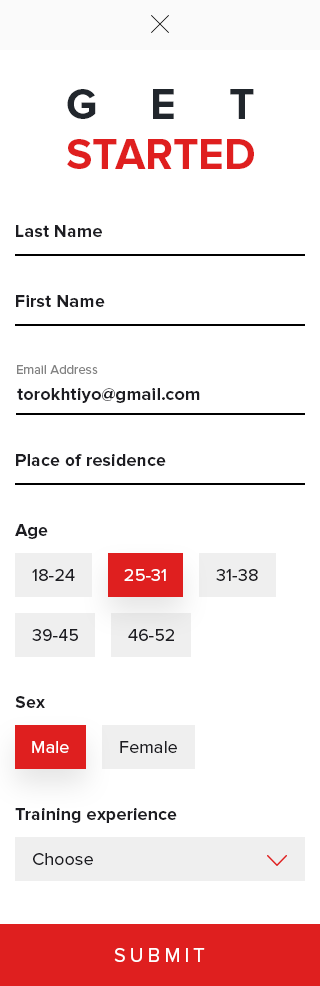
<style>
.page{position:relative;width:320px;height:986px;background:#ffffff}
.page>*{position:absolute;margin:0}
.t1{font:44px/50px "ProximaNova-Bold";color:#df1f1f}
.t2{font:44px/50px "ProximaNova-Bold";letter-spacing:1.2em;color:#21262c}
.t3{font:18px "ProximaNova-Bold";letter-spacing:0.005em;color:#1d1d22}
.t4{font:13px "ProximaNova-Regular";letter-spacing:0.005em;color:#838383}
.t5{font:18px "ProximaNova-Regular";letter-spacing:0.005em;color:#1d1d22}
.t6{font:18px "ProximaNova-Regular";letter-spacing:0.005em;color:#ffffff}
.t7{font:20px "ProximaNova-Regular";letter-spacing:0.2em;color:#ffffff}
</style>
<div class="page">
<p class="t1" style="left:67px;top:89px;width:187px;height:80px"><span class="t2">GET<br></span>STARTED</p>
<p class="t3" style="left:16px;top:225px;width:86px;height:12px">Last Name</p>
<p class="t3" style="left:16px;top:295px;width:89px;height:12px">First Name</p>
<p class="t4" style="left:17px;top:365px;width:81px;height:9px">Email Address</p>
<p class="t3" style="left:17px;top:388px;width:183px;height:15px">torokhtiyo@gmail.com</p>
<p class="t3" style="left:16px;top:454px;width:150px;height:12px">Place of residence</p>
<p class="t3" style="left:15px;top:524px;width:33px;height:15px">Age</p>
<p class="t5" style="left:32px;top:569px;width:43px;height:12px">18-24</p>
<p class="t6" style="left:124px;top:569px;width:42px;height:12px">25-31</p>
<p class="t5" style="left:216px;top:569px;width:42px;height:12px">31-38</p>
<p class="t5" style="left:32px;top:629px;width:46px;height:12px">39-45</p>
<p class="t5" style="left:128px;top:629px;width:46px;height:12px">46-52</p>
<p class="t3" style="left:15px;top:696px;width:30px;height:12px">Sex</p>
<p class="t6" style="left:32px;top:741px;width:37px;height:12px">Male</p>
<p class="t5" style="left:120px;top:741px;width:57px;height:12px">Female</p>
<p class="t3" style="left:15px;top:808px;width:162px;height:15px">Training experience</p>
<p class="t5" style="left:33px;top:853px;width:60px;height:12px">Choose</p>
<p class="t7" style="left:114px;top:948px;width:91px;height:14px">SUBMIT</p>
</div>
